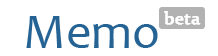
<style>
.page{position:relative;width:218px;height:56px;background:#ffffff}
.page>*{position:absolute;margin:0}
.t1{font:50px "Candara";color:#246394}
</style>
<div class="page">
<p class="t1" style="left:26px;top:16px;width:132px;height:32px">Memo</p>
</div>
